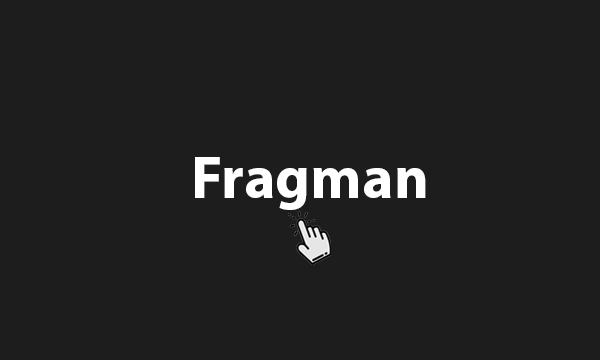
<style>
.page{position:relative;width:600px;height:360px;background:#1d1d1d}
.page>*{position:absolute;margin:0}
.t1{font:60.1px "MyriadPro-Bold";color:#ffffff}
</style>
<div class="page">
<p class="t1" style="left:195px;top:157px;width:231px;height:53px">Fragman</p>
</div>
